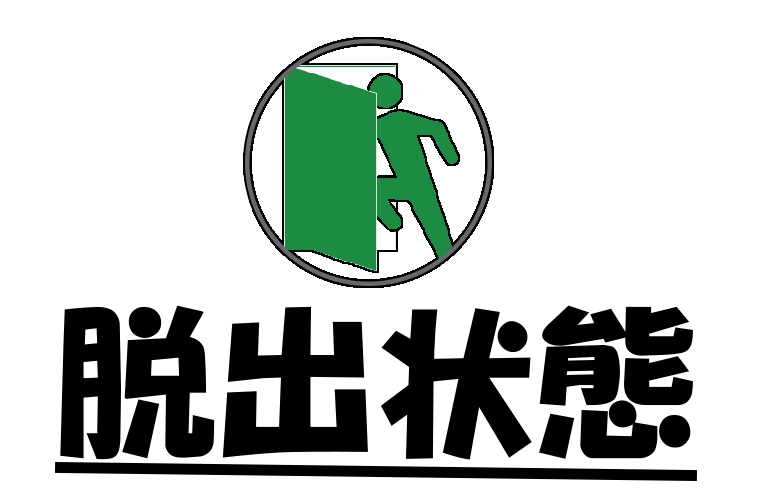
<style>
.page{position:relative;width:764px;height:500px;background:#ffffff}
.page>*{position:absolute;margin:0}
.t1{font:160px "HGSoeiKakupoptai";color:#000000}
</style>
<div class="page">
<p class="t1" style="left:60px;top:305px;width:633px;height:155px">脱出状態</p>
</div>
